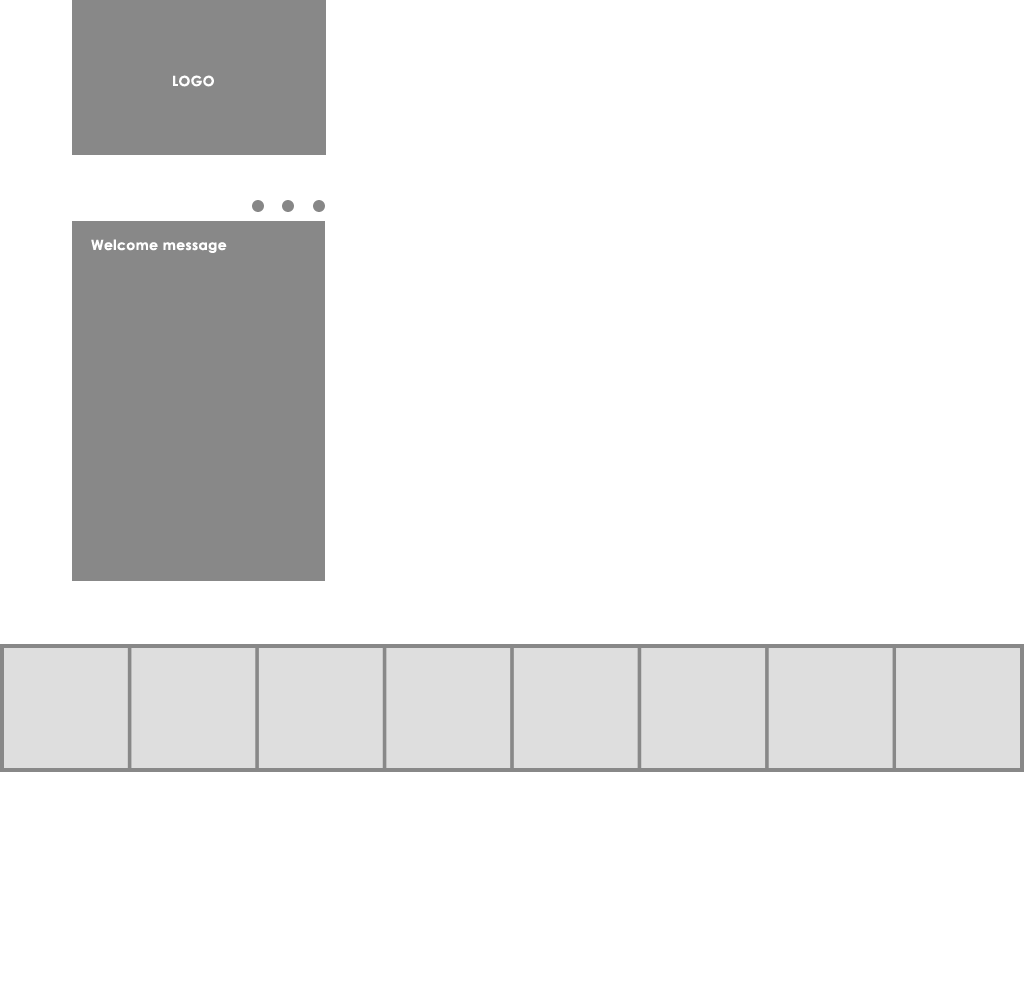
<style>
.page{position:relative;width:1024px;height:1000px;background:#ffffff}
.page>*{position:absolute;margin:0}
.t1{font:14px "CenturyGothic-Bold";letter-spacing:0.025em;color:#ffffff}
</style>
<div class="page">
<p class="t1" style="left:173px;top:75px;width:41px;height:12px">LOGO</p>
<p class="t1" style="left:91px;top:239px;width:136px;height:14px">Welcome message</p>
</div>
